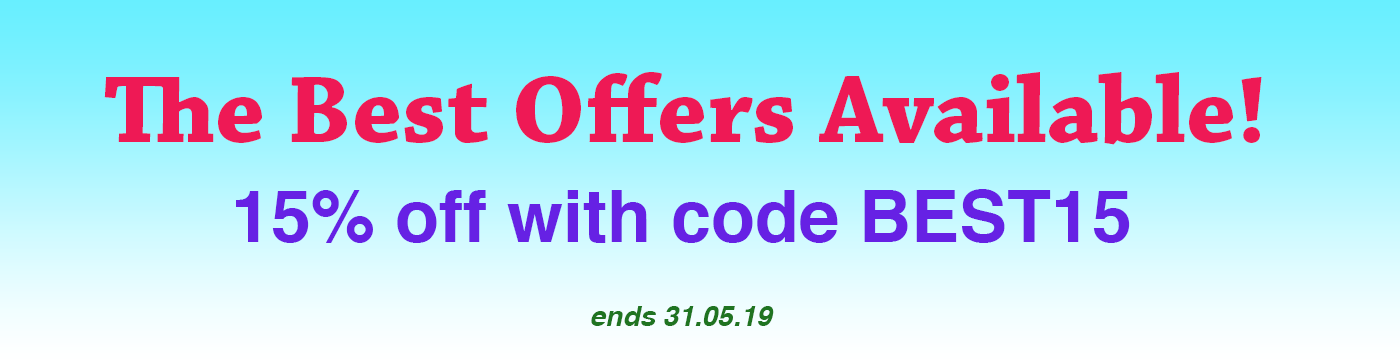
<style>
.page{position:relative;width:1400px;height:360px}
.page>*{position:absolute;margin:0}
.t1{font:100px "ChaparralPro-Bold";color:#ee1955}
.t2{font:72px "Helvetica-Bold";color:#6621e4}
.t3{font:28px "Helvetica-BoldOblique";color:#1f7421}
</style>
<div class="page">
<p class="t1" style="left:104px;top:72px;width:1158px;height:73px">The Best Offers Available!</p>
<p class="t2" style="left:236px;top:189px;width:894px;height:54px">15% off with code BEST15</p>
<p class="t3" style="left:591px;top:306px;width:183px;height:20px">ends 31.05.19</p>
</div>
